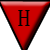
<style>
.page{position:relative;width:50px;height:50px;background:#ffffff}
.page>*{position:absolute;margin:0}
.t1{font:24px "SimSun";color:#000000}
</style>
<div class="page">
<p class="t1" style="left:18px;top:10px;width:12px;height:16px">H</p>
</div>
